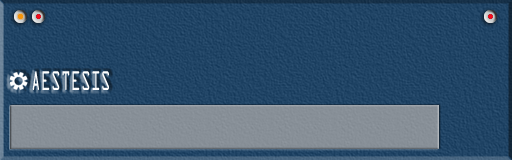
<style>
.page{position:relative;width:512px;height:160px}
.page>*{position:absolute;margin:0}
.t1{font:28.8px "OCRAExtended";color:#fefefe;scale:0.57 1}
</style>
<div class="page">
<p class="t1" style="left:32px;top:71px;width:77px;height:19px">AESTESIS</p>
</div>
